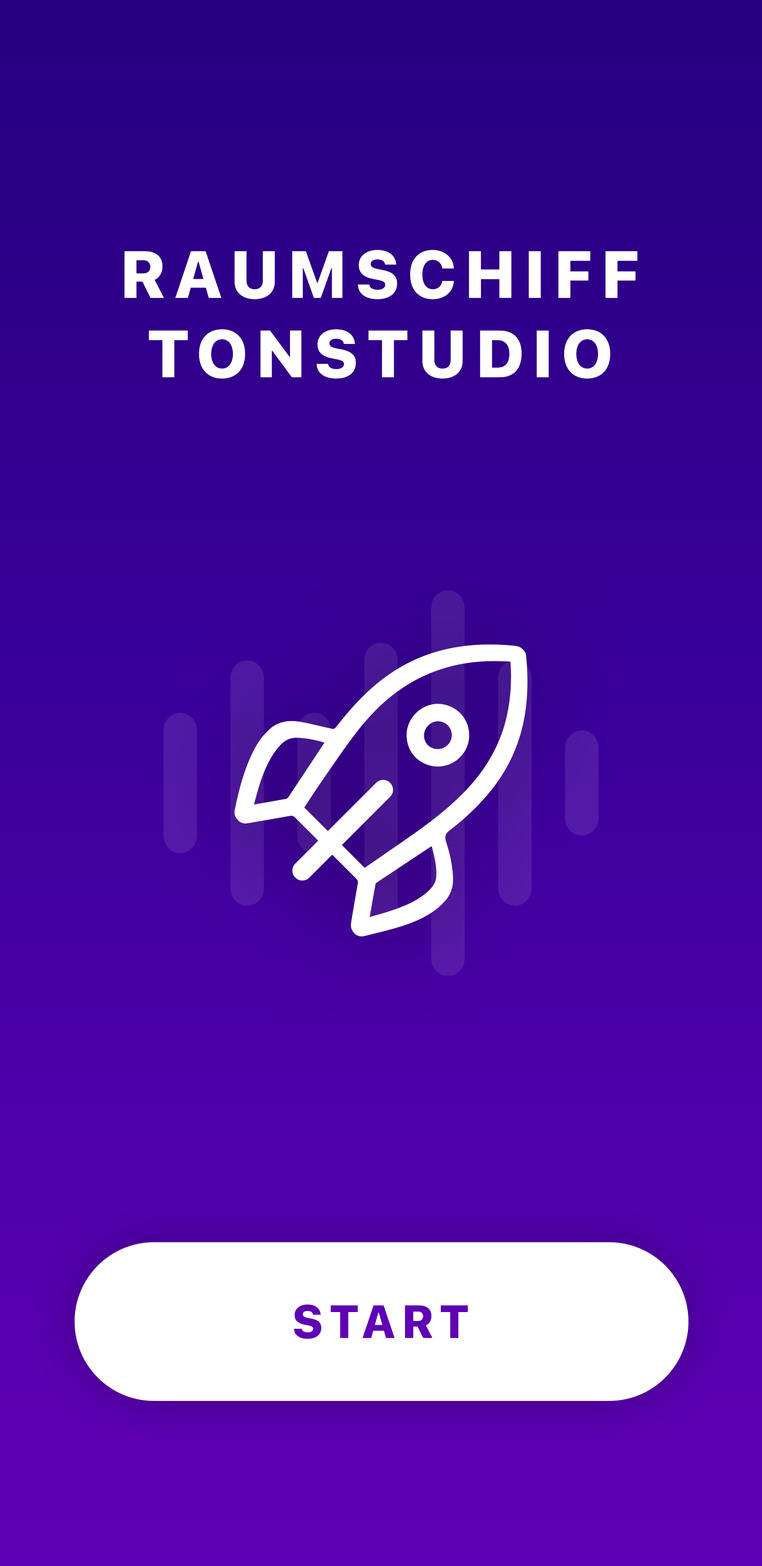
<style>
.page{position:relative;width:762px;height:1566px}
.page>*{position:absolute;margin:0}
.t1{font:66.1px/79.3px "SFProText-Heavy";letter-spacing:0.1em;color:#ffffff;text-transform:uppercase}
.t2{font:46.3px "SFProText-Heavy";letter-spacing:0.1em;color:#6000b5;text-transform:uppercase}
</style>
<div class="page">
<p class="t1" style="left:124px;top:250px;width:513px;height:129px;text-align:center">Raumschiff<br>Tonstudio</p>
<p class="t2" style="left:294px;top:1304px;width:174px;height:35px">Start</p>
</div>
